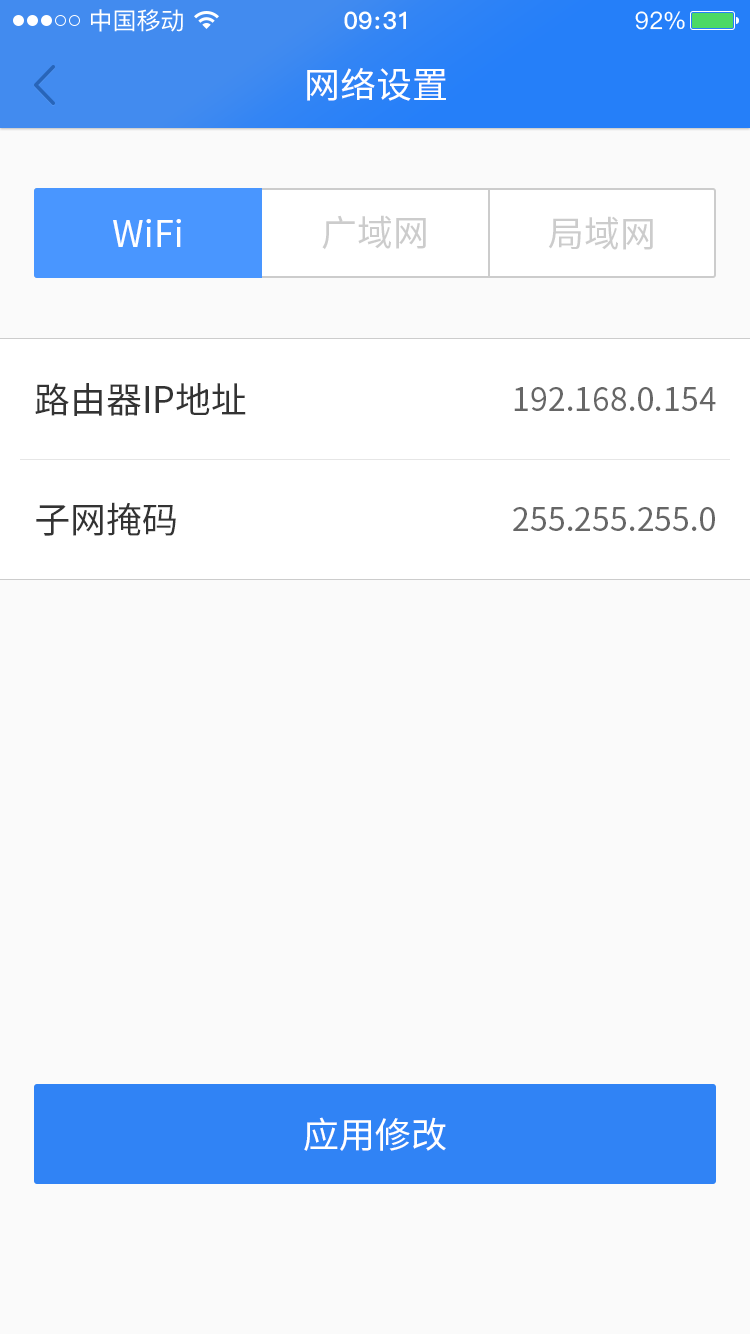
<style>
.page{position:relative;width:750px;height:1334px;background:#fafafa}
.page>*{position:absolute;margin:0}
.t1{font:36px "SourceHanSansCN-Regular";color:#ffffff}
.t2{font:36px "SourceHanSansCN-Regular";color:#cccccc}
.t3{font:36px "SourceHanSansCN-Regular";color:#333333}
.t4{font:32px "SourceHanSansCN-Regular";color:#666666}
</style>
<div class="page">
<p class="t1" style="left:307px;top:67px;width:139px;height:34px">网络设置</p>
<p class="t1" style="left:113px;top:219px;width:68px;height:28px">WiFi</p>
<p class="t2" style="left:322px;top:215px;width:104px;height:35px">广域网</p>
<p class="t2" style="left:548px;top:216px;width:105px;height:34px">局域网</p>
<p class="t3" style="left:35px;top:383px;width:211px;height:33px">路由器IP地址</p>
<p class="t4" style="left:514px;top:387px;width:202px;height:24px">192.168.0.154</p>
<p class="t3" style="left:36px;top:502px;width:140px;height:34px">子网掩码</p>
<p class="t4" style="left:513px;top:507px;width:202px;height:24px">255.255.255.0</p>
<p class="t1" style="left:304px;top:1117px;width:142px;height:34px">应用修改</p>
</div>
